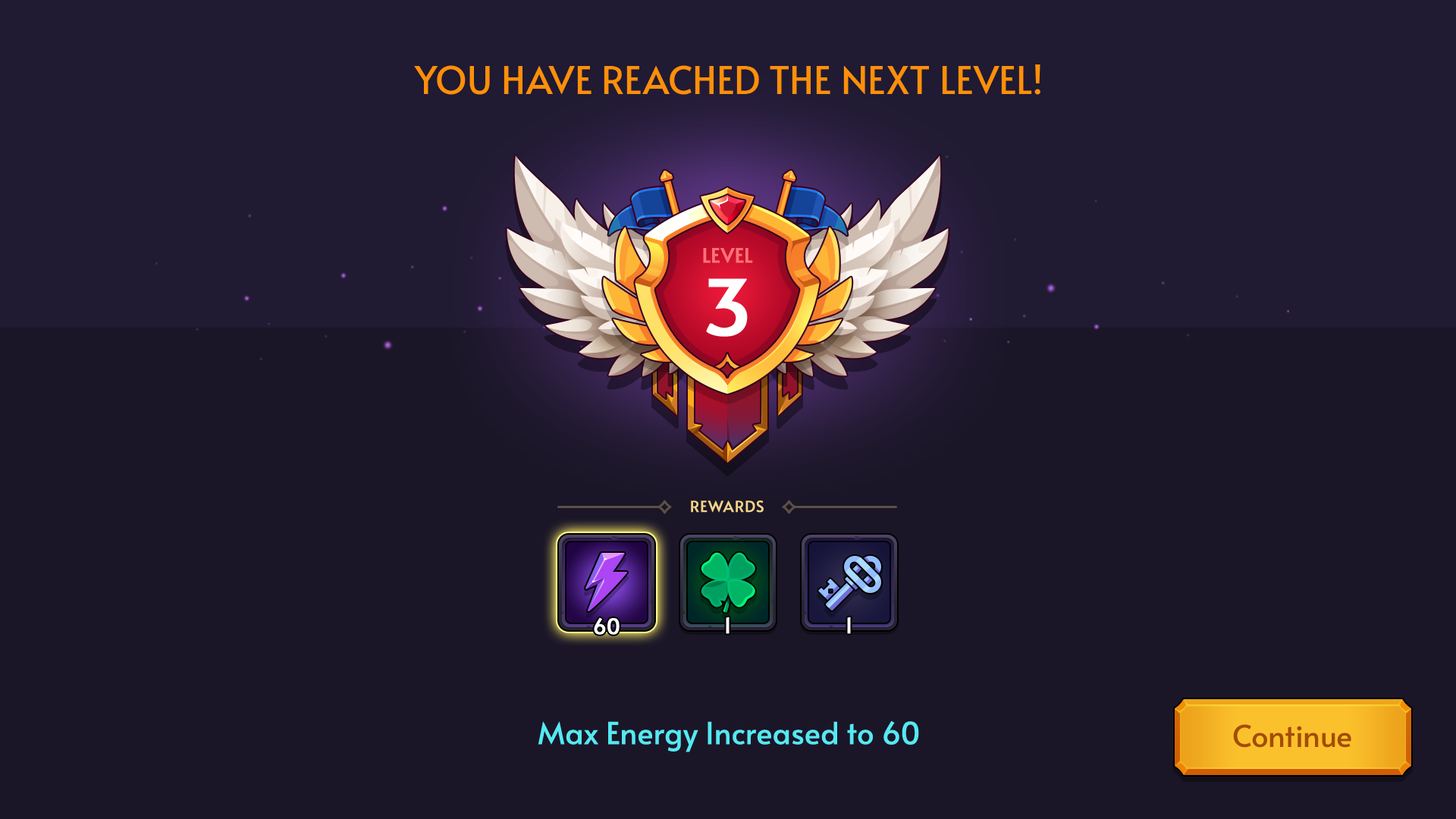
<style>
.page{position:relative;width:1456px;height:819px;background:#1a1627}
.page>*{position:absolute;margin:0}
.t1{font:37.9px "Alata-Regular";color:#ff8f09;text-transform:uppercase}
.t2{font:19.7px "Alata-Regular";color:#ff7276;text-transform:uppercase;font-weight:bold}
.t3{font:75.8px "Alata-Regular";color:#ffffff;text-transform:uppercase;font-weight:bold}
.t4{font:15.2px "Alata-Regular";color:#f4d487;text-transform:uppercase;font-weight:bold}
.t5{font:21.2px "Alata-Regular";letter-spacing:0.02em;color:#ffffff;font-weight:bold}
.t6{font:30.3px "Alata-Regular";color:#54e9f2}
.t7{font:30.3px "Alata-Regular";color:#a34c05}
</style>
<div class="page">
<p class="t1" style="left:414px;top:64px;width:626px;height:31px">You have reached the Next Level!</p>
<p class="t2" style="left:703px;top:248px;width:50px;height:15px">level</p>
<p class="t3" style="left:706px;top:278px;width:42px;height:59px">3</p>
<p class="t4" style="left:691px;top:500px;width:73px;height:13px">Rewards</p>
<p class="t5" style="left:594px;top:617px;width:26px;height:18px">60</p>
<p class="t5" style="left:726px;top:617px;width:4px;height:17px">1</p>
<p class="t5" style="left:847px;top:617px;width:4px;height:17px">1</p>
<p class="t6" style="left:538px;top:720px;width:381px;height:32px">Max Energy Increased to 60</p>
<p class="t7" style="left:1233px;top:724px;width:118px;height:24px">Continue</p>
</div>
